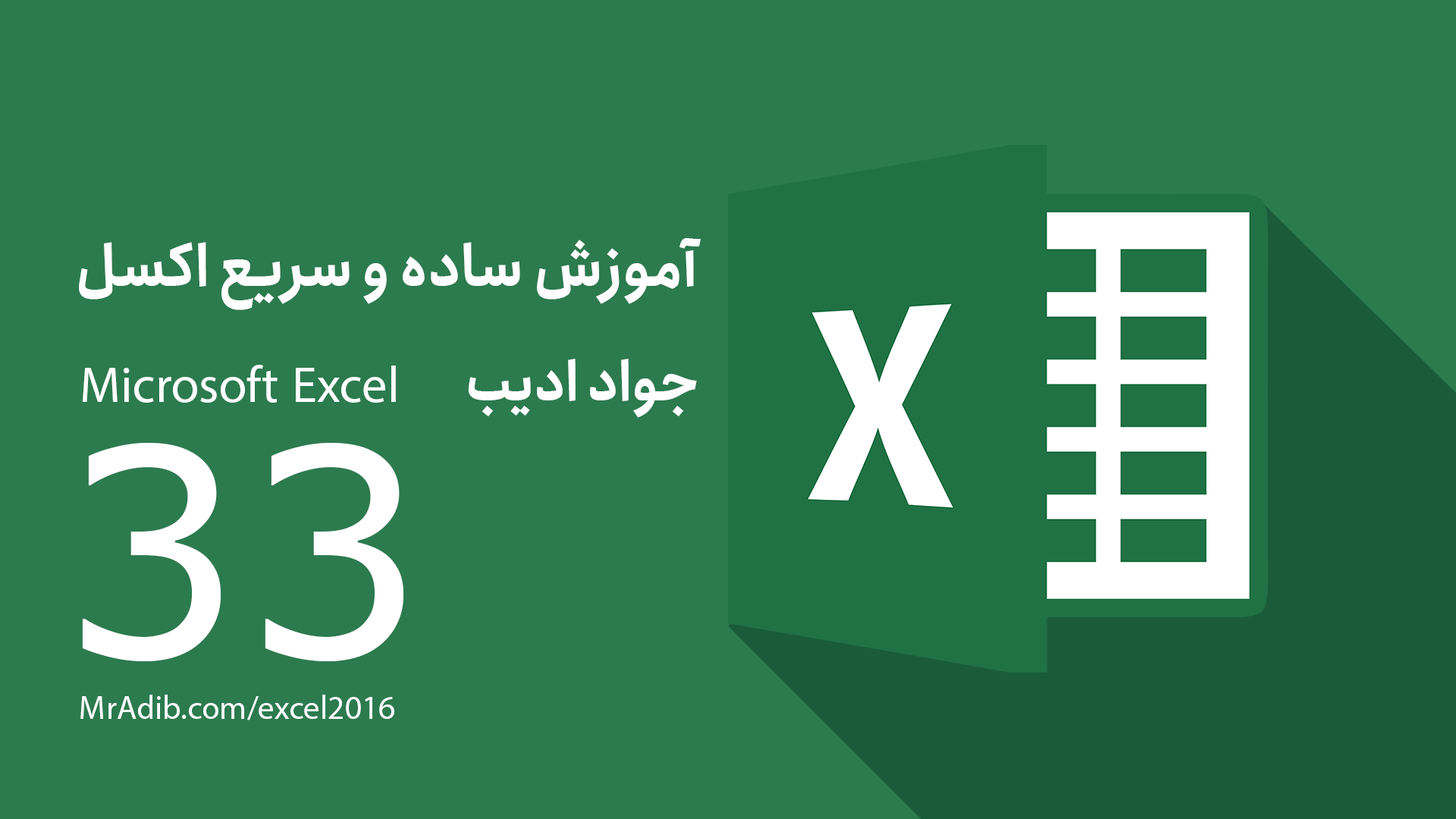
<style>
.page{position:relative;width:1456px;height:819px;background:#2b7b4f}
.page>*{position:absolute;margin:0}
.t1{font:57.3px "Anjoman-Bold";color:#ffffff}
.t2{font:70.7px "MyriadArabic-Regular";color:#ffffff}
.t3{font:54.6px "Anjoman-Bold";color:#ffffff}
.t4{font:288.2px "Verdana";color:#ffffff}
.t5{font:45.9px "MyriadArabic-Regular";color:#ffffff}
</style>
<div class="page">
<p class="t1" style="left:79px;top:238px;width:622px;height:72px">آموزش ساده و سریع اکسل</p>
<p class="t2" style="left:83px;top:365px;width:313px;height:38px">Microsoft Excel</p>
<p class="t3" style="left:468px;top:359px;width:229px;height:59px">جواد ادیب</p>
<p class="t4" style="left:82px;top:443px;width:321px;height:218px">33</p>
<p class="t5" style="left:80px;top:695px;width:314px;height:25px">MrAdib.com/excel2016</p>
</div>
